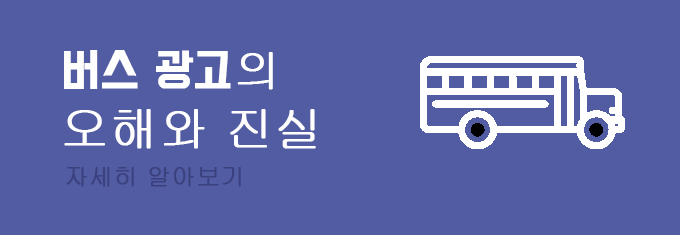
<style>
.page{position:relative;width:680px;height:235px;background:#525ca3}
.page>*{position:absolute;margin:0}
.t1{font:40px "BMDoHyeon";color:#fffefe;font-weight:bold}
.t2{font:46px "Gulim";color:#fffefe;font-weight:bold}
.t3{font:48px "Gulim";color:#fffefe;font-weight:bold}
.t4{font:24px "Gulim";color:#3b407f;font-weight:bold}
</style>
<div class="page">
<p class="t1" style="left:64px;top:50px;width:167px;height:39px">버스 광고</p>
<p class="t2" style="left:237px;top:52px;width:36px;height:38px">의</p>
<p class="t3" style="left:64px;top:109px;width:252px;height:40px">오해와 진실</p>
<p class="t4" style="left:66px;top:167px;width:175px;height:20px">자세히 알아보기</p>
</div>
